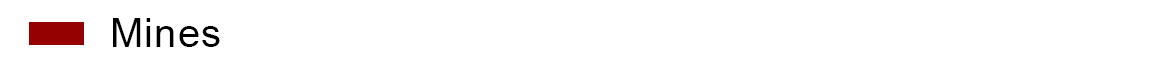
<style>
.page{position:relative;width:1151px;height:67px;background:#ffffff}
.page>*{position:absolute;margin:0}
.t1{font:40px "ArialMT";letter-spacing:0.03em;color:#000000}
</style>
<div class="page">
<p class="t1" style="left:113px;top:18px;width:107px;height:29px">Mines</p>
</div>
